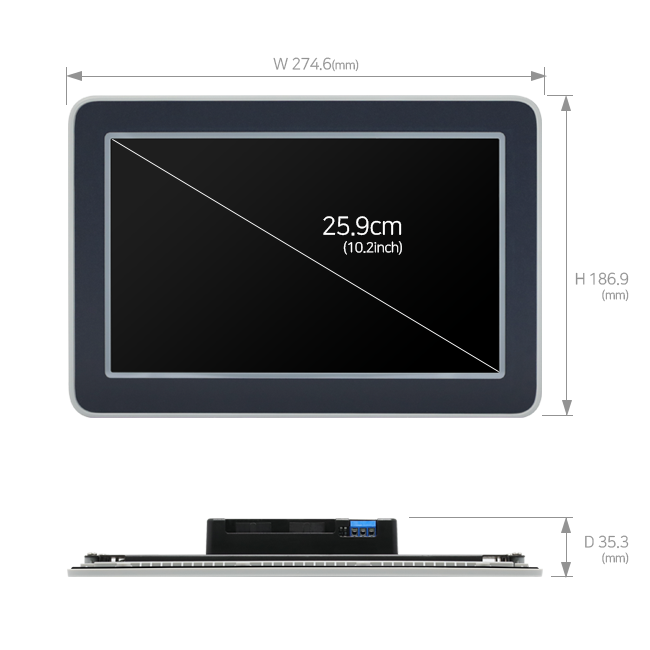
<style>
.page{position:relative;width:650px;height:650px;background:#ffffff}
.page>*{position:absolute;margin:0}
.t1{font:16px "NanumSquareR";letter-spacing:-0.03em;color:#939393}
.t2{font:12px "NanumSquareR";letter-spacing:-0.03em;color:#939393}
.t3{font:14px/18px "NanumSquareR";letter-spacing:-0.03em;color:#ffffff}
.t4{font:25px/18px "NanumSquareR";letter-spacing:-0.03em;color:#ffffff}
.t5{font:16px/15px "NanumSquareR";letter-spacing:-0.03em;color:#939393}
.t6{font:12px/15px "NanumSquareR";letter-spacing:-0.03em;color:#939393}
</style>
<div class="page">
<p class="t1" style="left:273px;top:57px;width:86px;height:15px">W 274.6<span class="t2">(mm)</span></p>
<p class="t3" style="left:323px;top:216px;width:79px;height:39px;text-align:right"><span class="t4">25.9cm<br></span>(10.2inch)</p>
<p class="t5" style="left:575px;top:272px;width:54px;height:30px;text-align:right">H 186.9<br><span class="t6">(mm)</span></p>
<p class="t5" style="left:585px;top:535px;width:44px;height:30px;text-align:right">D 35.3<br><span class="t6">(mm)</span></p>
</div>
